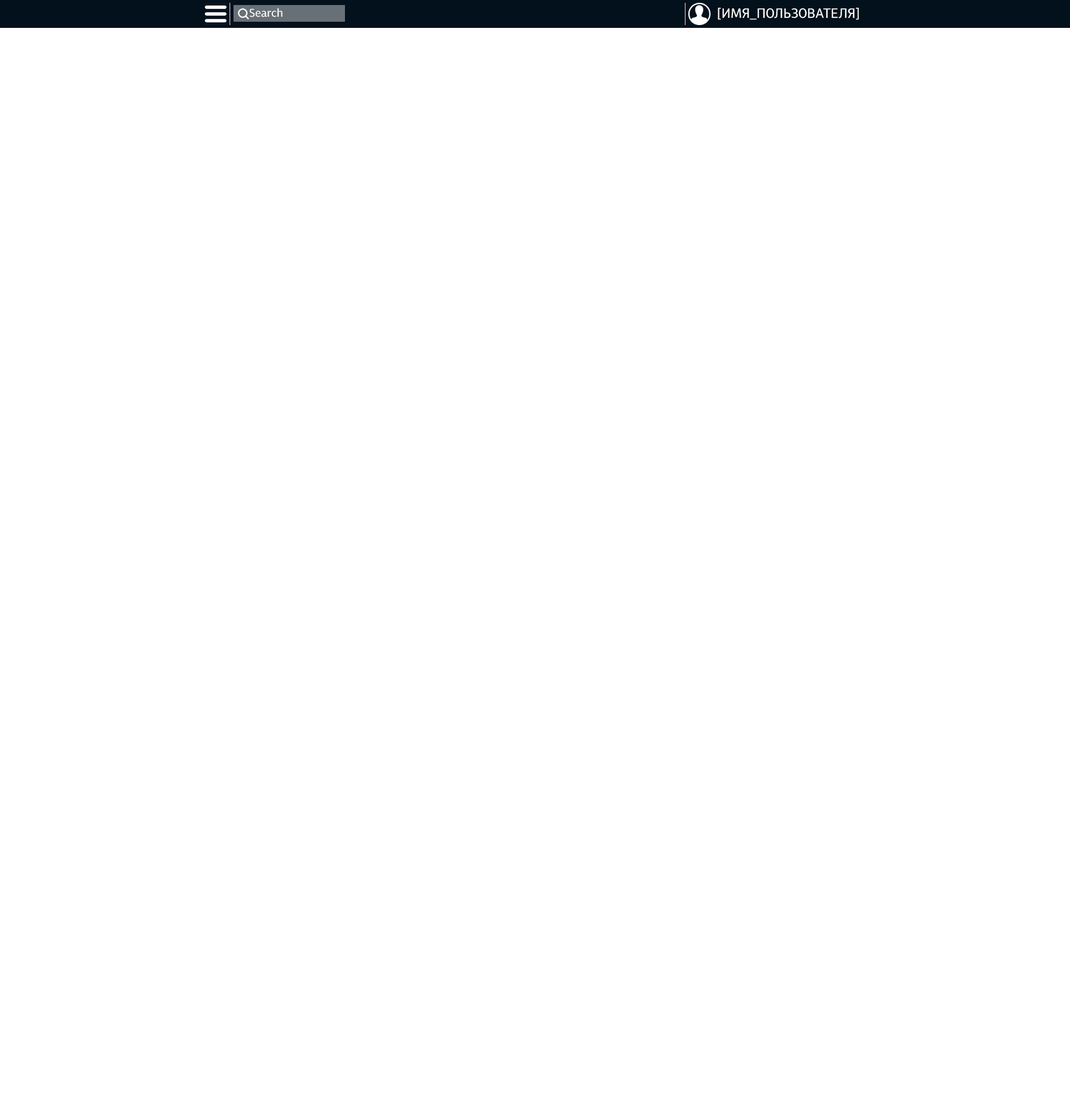
<style>
.page{position:relative;width:1070px;height:1115px;background:#ffffff}
.page>*{position:absolute;margin:0}
.t1{font:11.1px "UZSans-Regular";color:#ffffff}
.t2{font:13.4px "UZSans-Regular";color:#ffffff}
</style>
<div class="page">
<p class="t1" style="left:250px;top:8px;width:33px;height:9px">Search</p>
<p class="t2" style="left:718px;top:7px;width:141px;height:13px">[ИМЯ_ПОЛЬЗОВАТЕЛЯ]</p>
</div>
